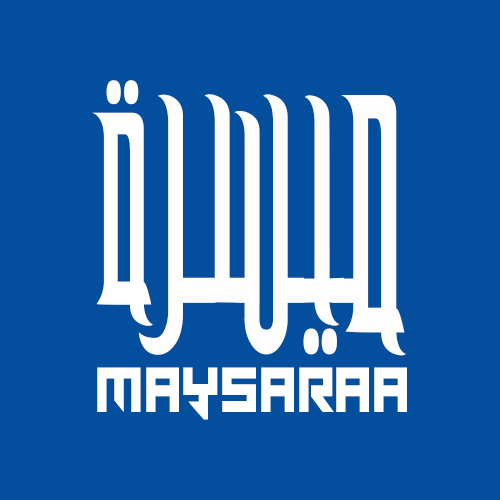
<style>
.page{position:relative;width:500px;height:500px;background:#034f9d}
.page>*{position:absolute;margin:0}
.t1{font:378.4px "M-Unicode-Dawlat";letter-spacing:0.05em;color:#ffffff;scale:0.6 1}
.t2{font:408.6px "M-Unicode-Dawlat";letter-spacing:0.05em;color:#fefefe;scale:0.6 1}
.t3{font:84px "TarrgetCondensed";letter-spacing:0.05em;color:#ffffff;scale:0.6 1}
</style>
<div class="page">
<p class="t1" style="left:92px;top:80px;width:61px;height:246px">ة</p>
<p class="t2" style="left:138px;top:94px;width:268px;height:262px">ميسر</p>
<p class="t3" style="left:97px;top:367px;width:310px;height:53px">Maysaraa</p>
</div>
